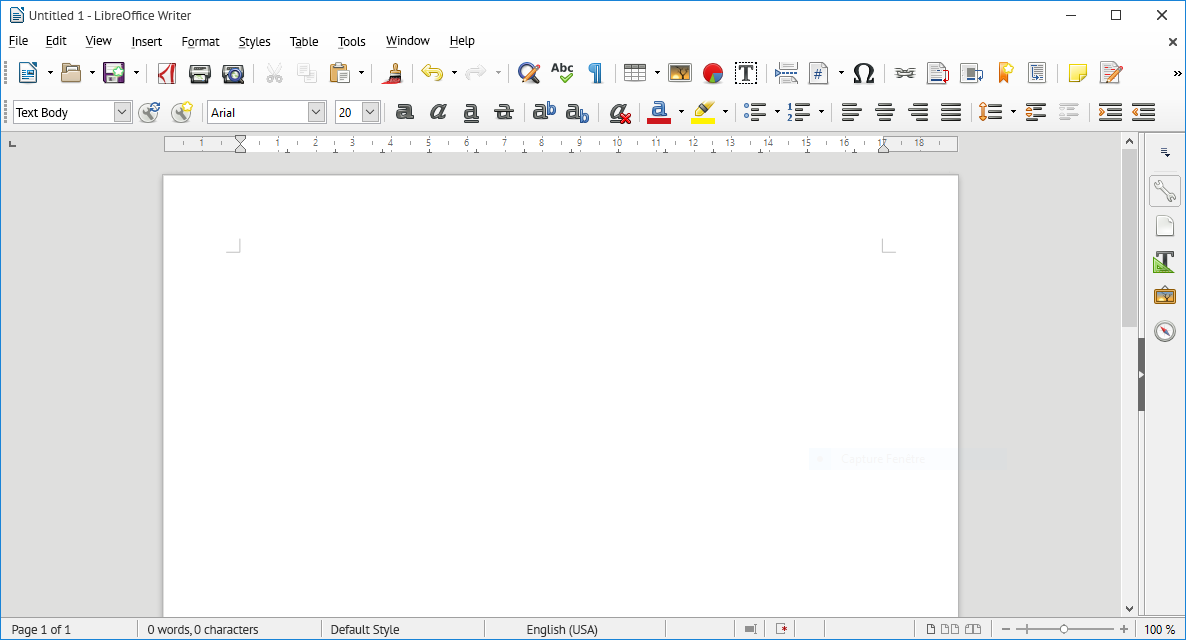
<style>
.page{position:relative;width:1186px;height:640px;background:#ffffff}
.page>*{position:absolute;margin:0}
.t1{font:13px "PTSans-Regular";letter-spacing:-0.02em;color:#000000}
.t2{font:13px "PTSans-Regular";letter-spacing:-0.02em;color:#000000;text-decoration:underline}
.t3{font:13px "PTSans-Regular";letter-spacing:-0.02em;color:#333333}
</style>
<div class="page">
<p class="t1" style="left:8px;top:36px;width:20px;height:12px"><span class="t2">F</span>ile</p>
<p class="t1" style="left:45px;top:36px;width:22px;height:12px"><span class="t2">E</span>dit</p>
<p class="t1" style="left:85px;top:36px;width:27px;height:12px"><span class="t2">V</span>iew</p>
<p class="t1" style="left:131px;top:37px;width:32px;height:12px"><span class="t2">I</span>nsert</p>
<p class="t1" style="left:182px;top:37px;width:38px;height:12px">F<span class="t2">o</span>rmat</p>
<p class="t1" style="left:238px;top:37px;width:33px;height:12px"><span class="t2">S</span>tyles</p>
<p class="t1" style="left:289px;top:37px;width:30px;height:12px">T<span class="t2">a</span>ble</p>
<p class="t1" style="left:338px;top:37px;width:28px;height:12px"><span class="t2">T</span>ools</p>
<p class="t1" style="left:386px;top:36px;width:44px;height:12px"><span class="t2">W</span>indow</p>
<p class="t1" style="left:449px;top:36px;width:26px;height:12px"><span class="t2">H</span>elp</p>
<p class="t1" style="left:15px;top:108px;width:53px;height:12px">Text Body</p>
<p class="t3" style="left:12px;top:625px;width:59px;height:12px">Page 1 of 1</p>
<p class="t3" style="left:148px;top:625px;width:110px;height:11px">0 words, 0 characters</p>
<p class="t3" style="left:331px;top:625px;width:69px;height:12px">Default Style</p>
<p class="t3" style="left:527px;top:625px;width:71px;height:12px">English (USA)</p>
</div>
